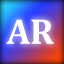
<style>
.page{position:relative;width:64px;height:64px}
.page>*{position:absolute;margin:0}
.t1{font:36px "Cambria-Bold";color:#ffffff}
</style>
<div class="page">
<p class="t1" style="left:6px;top:19px;width:48px;height:25px">AR</p>
</div>
